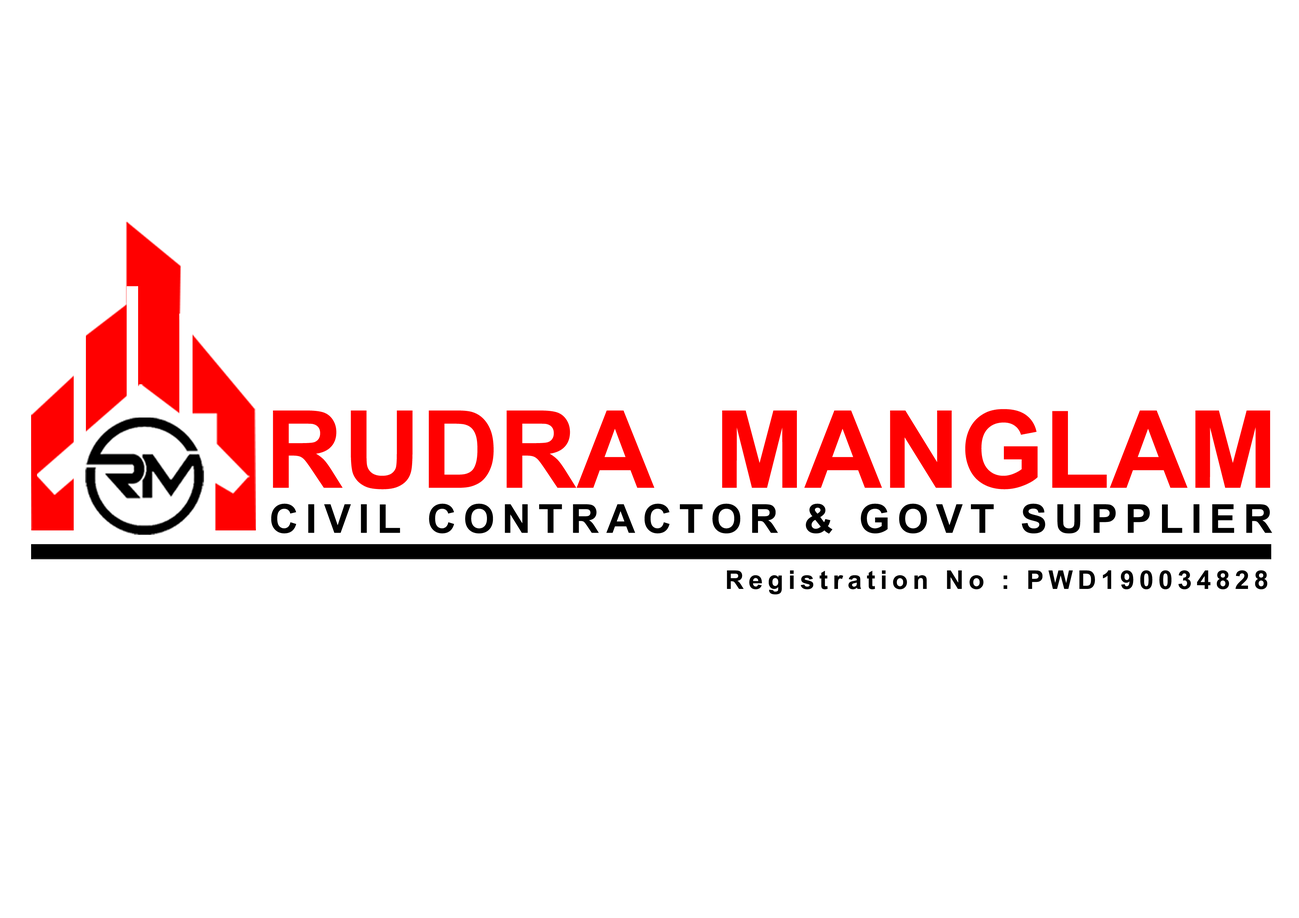
<style>
.page{position:relative;width:1299px;height:918px;background:#ffffff}
.page>*{position:absolute;margin:0}
.t1{font:107.8px "Arial-BoldMT";color:#ff0000}
.t2{font:39.9px "Arial-BoldMT";letter-spacing:0.188em;color:#000000}
.t3{font:25.7px "Arial-BoldMT";letter-spacing:0.188em;color:#000000}
</style>
<div class="page">
<p class="t1" style="left:273px;top:409px;width:997px;height:80px">RUDRA  MANGLAM</p>
<p class="t2" style="left:271px;top:504px;width:1001px;height:30px">CIVIL CONTRACTOR &amp; GOVT SUPPLIER</p>
<p class="t3" style="left:727px;top:570px;width:540px;height:25px">Registration No : PWD190034828</p>
</div>
